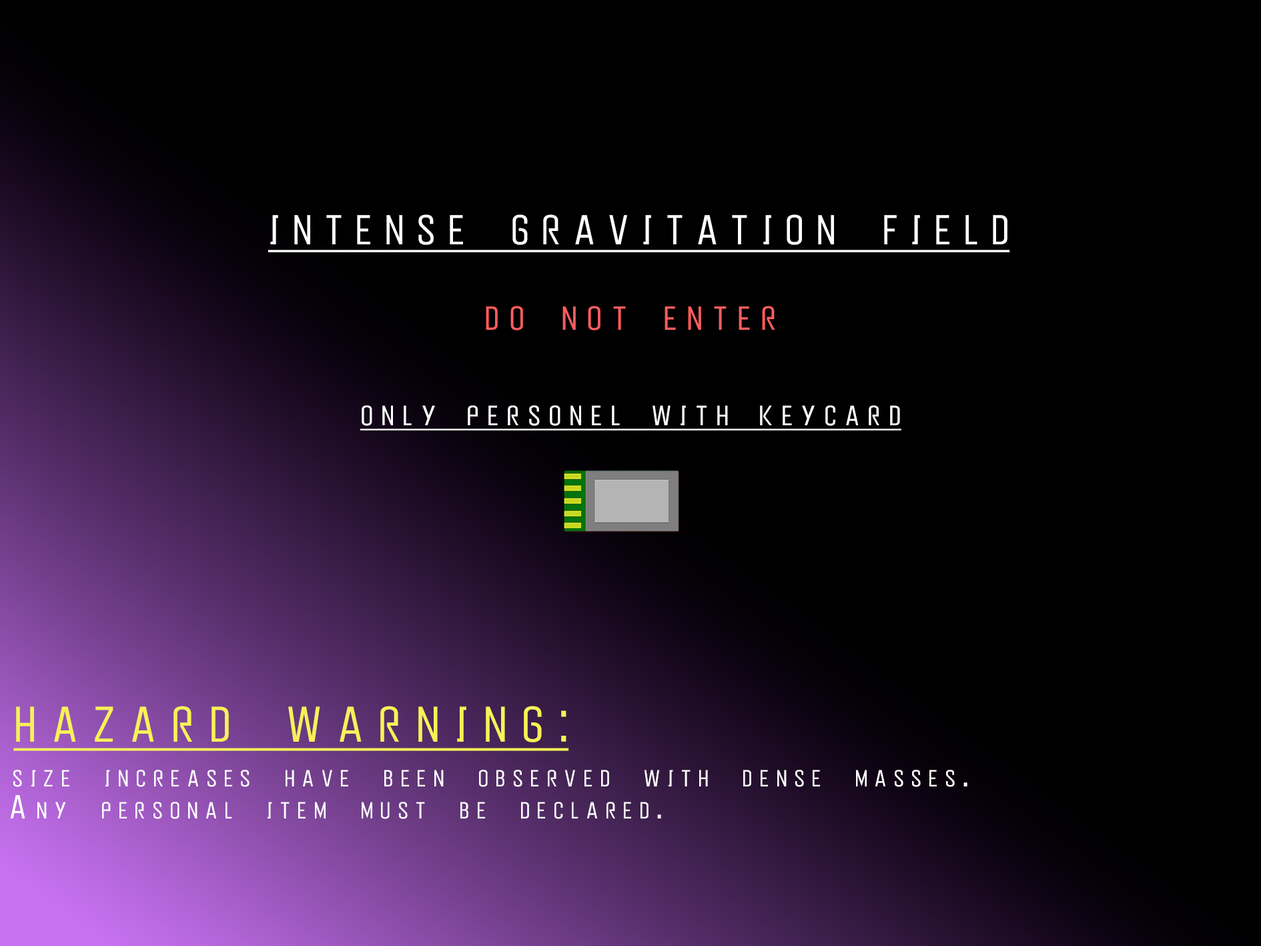
<style>
.page{position:relative;width:1261px;height:946px;background:#000000}
.page>*{position:absolute;margin:0}
.t1{font:41.7px "PeytonDisplay-ExtraLight";letter-spacing:0.28em;color:#ffffff;text-decoration:underline}
.t2{font:33.4px "PeytonDisplay-ExtraLight";letter-spacing:0.28em;color:#ff5d5d;text-transform:uppercase}
.t3{font:27.8px "PeytonDisplay-ExtraLight";letter-spacing:0.28em;color:#ffffff;text-transform:uppercase;text-decoration:underline}
.t4{font:50px "PeytonDisplay-ExtraLight";letter-spacing:0.28em;color:#f7f157;text-transform:uppercase;text-decoration:underline}
.t5{font:33.4px "PeytonDisplay-ExtraLight";letter-spacing:0.28em;color:#ffffff;font-variant:small-caps}
</style>
<div class="page">
<p class="t1" style="left:268px;top:214px;width:742px;height:38px">INTENSE GRAVITATION FIELD</p>
<p class="t2" style="left:486px;top:306px;width:289px;height:24px">Do Not Enter</p>
<p class="t3" style="left:360px;top:405px;width:541px;height:25px">Only personel with Keycard</p>
<p class="t4" style="left:13px;top:705px;width:556px;height:46px">HAZARD wARNING:</p>
<p class="t5" style="left:13px;top:769px;width:955px;height:18px">size increases have been observed with dense masses.</p>
<p class="t5" style="left:10px;top:795px;width:651px;height:24px">Any personal item must be declared.</p>
</div>
